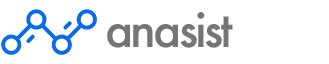
<style>
.page{position:relative;width:329px;height:64px;background:#ffffff}
.page>*{position:absolute;margin:0}
.t1{font:47px "Futura-Medium";letter-spacing:-0.06em;color:#757575}
</style>
<div class="page">
<p class="t1" style="left:107px;top:12px;width:126px;height:36px">anasist</p>
</div>
